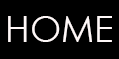
<style>
.page{position:relative;width:119px;height:59px;background:#000000}
.page>*{position:absolute;margin:0}
.t1{font:36px "CenturyGothic";color:#fff8f8}
</style>
<div class="page">
<p class="t1" style="left:8px;top:16px;width:104px;height:26px">HOME</p>
</div>
